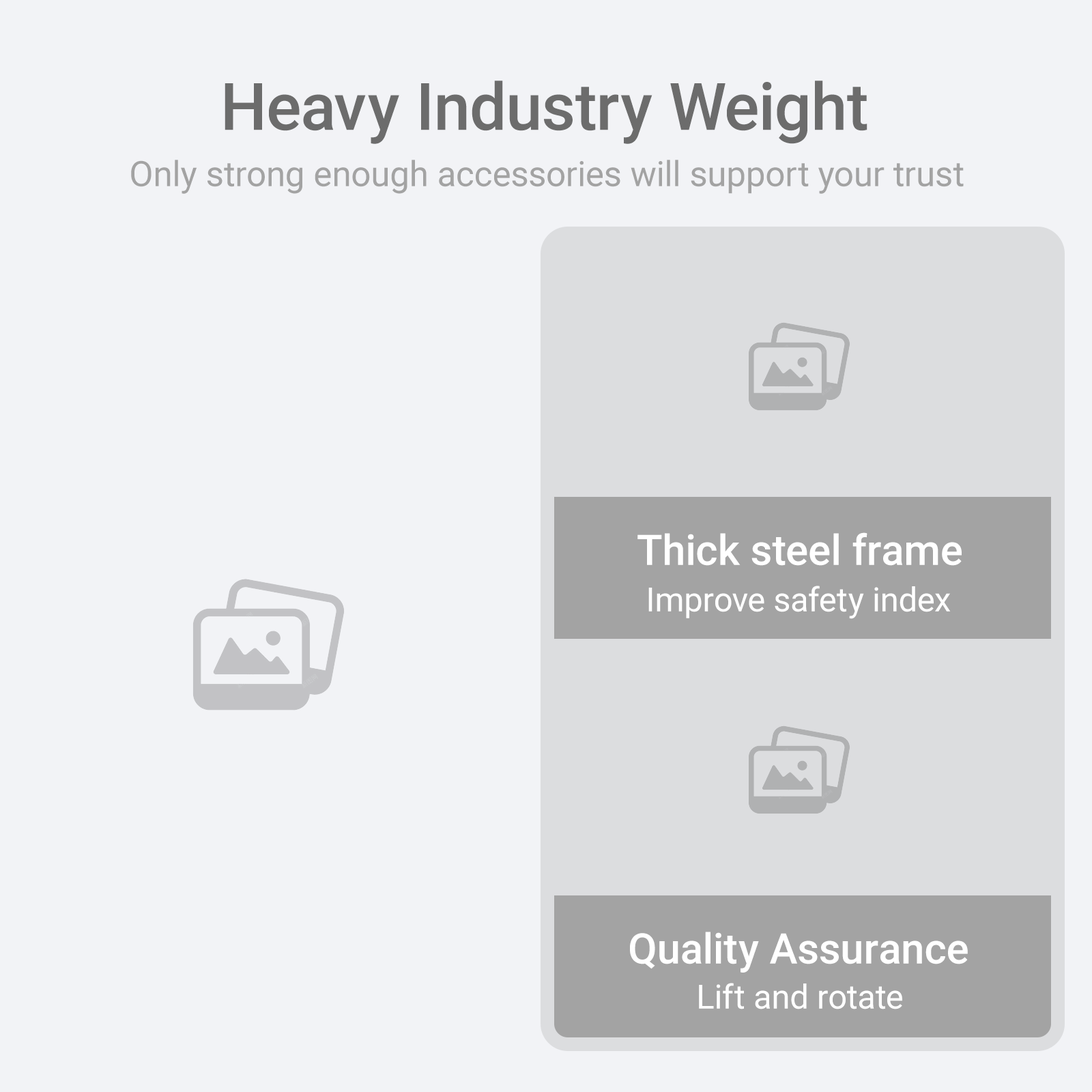
<style>
.page{position:relative;width:1092px;height:1092px;background:#f2f3f6}
.page>*{position:absolute;margin:0}
.t1{font:65.5px "Roboto-Medium";color:#6c6c6c}
.t2{font:34.9px "Roboto-Regular";color:#a3a3a3}
.t3{font:42.2px "Roboto-Medium";color:#ffffff}
.t4{font:33.5px "Roboto-Regular";color:#ffffff}
</style>
<div class="page">
<p class="t1" style="left:225px;top:81px;width:642px;height:63px">Heavy Industry Weight</p>
<p class="t2" style="left:131px;top:160px;width:833px;height:34px">Only strong enough accessories will support your trust</p>
<p class="t3" style="left:637px;top:532px;width:325px;height:34px">Thick steel frame</p>
<p class="t4" style="left:648px;top:586px;width:303px;height:33px">Improve safety index</p>
<p class="t3" style="left:630px;top:932px;width:338px;height:41px">Quality Assurance</p>
<p class="t4" style="left:699px;top:983px;width:203px;height:26px">Lift and rotate</p>
</div>
